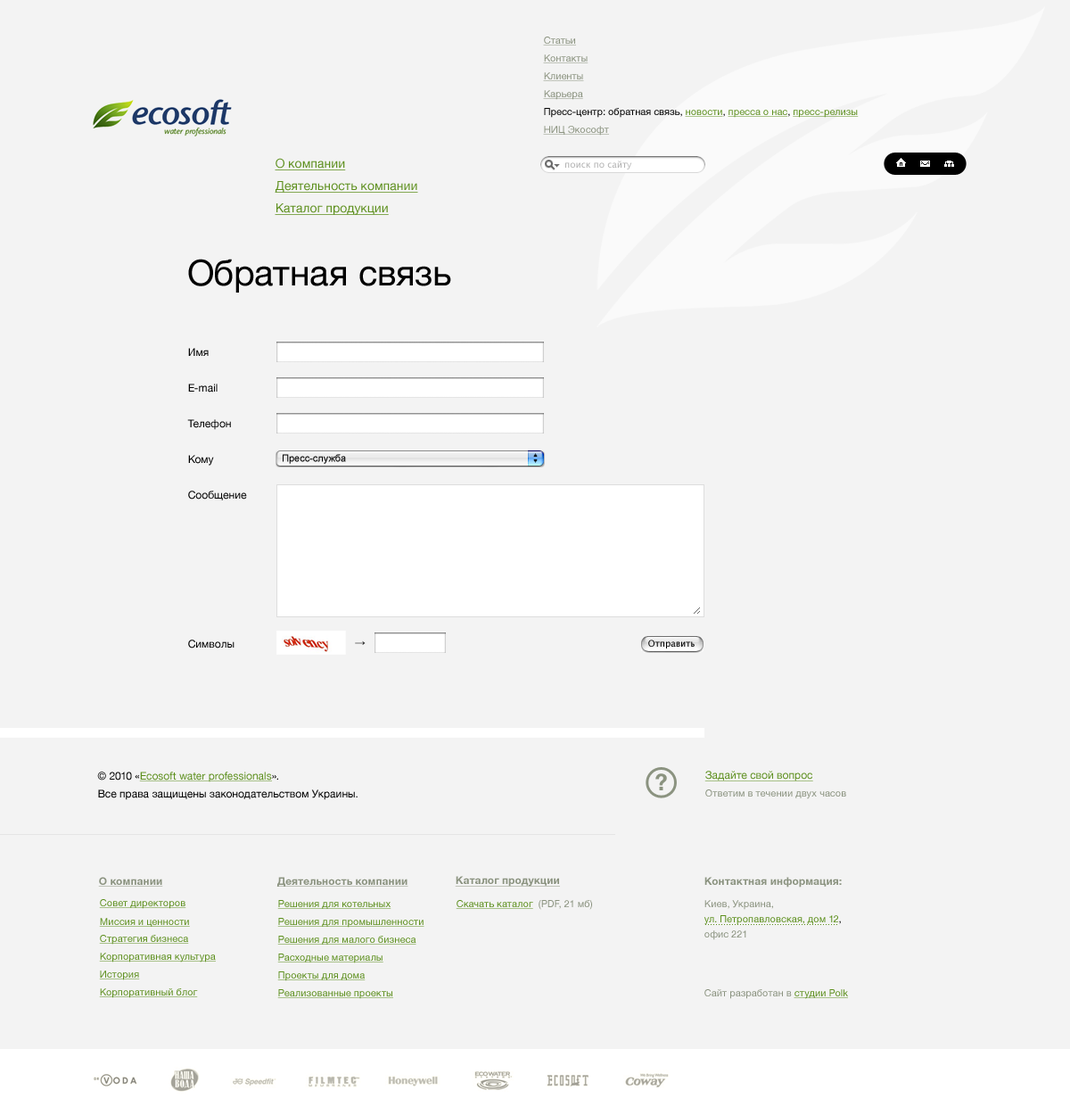
<style>
.page{position:relative;width:1070px;height:1115px;background:#f3f3f3}
.page>*{position:absolute;margin:0}
.t1{font:9.8px "HelveticaNeue";color:#8b9380;text-decoration:underline}
.t2{font:9.8px "HelveticaNeue";color:#000000}
.t3{font:9.8px "HelveticaNeue";color:#5e901f;text-decoration:underline}
.t4{font:9.8px "HelveticaNeue";color:#010101}
.t5{font:12.5px "HelveticaNeue";color:#5e901f;text-decoration:underline}
.t6{font:8.9px "LucidaGrande";color:#b2b2b2}
.t7{font:35.7px "HelveticaNeue";color:#000000}
.t8{font:10.7px "HelveticaNeue";color:#000000}
.t9{font:9.8px "ArialMT";color:#000000}
.t10{font:10.7px "ArialMT"}
.t11{font:8.9px "LucidaGrande";color:#000000}
.t12{font:10.7px/17.8px "HelveticaNeue";color:#000000}
.t13{font:10.7px/17.8px "HelveticaNeue";color:#5e901f;text-decoration:underline}
.t14{font:10.7px "HelveticaNeue";color:#5e901f;text-decoration:underline}
.t15{font:9.8px "HelveticaNeue";color:#8b9380}
.t16{font:10.7px "HelveticaNeue-Bold";color:#8b9380;text-decoration:underline}
.t17{font:9.8px/15.2px "HelveticaNeue";color:#5e901f}
.t18{font:10.7px/17.8px "HelveticaNeue-Bold";color:#8b9380}
.t19{font:9.8px/22.3px "HelveticaNeue";color:#8b9380}
.t20{font:9.8px/15.2px "HelveticaNeue";color:#000000}
.t21{font:9.8px/15.2px "HelveticaNeue";color:#8b9380}
</style>
<div class="page">
<p class="t1" style="left:543px;top:37px;width:33px;height:8px">Статьи</p>
<p class="t1" style="left:543px;top:54px;width:45px;height:9px">Контакты</p>
<p class="t1" style="left:543px;top:72px;width:41px;height:9px">Клиенты</p>
<p class="t1" style="left:543px;top:90px;width:40px;height:10px">Карьера</p>
<p class="t2" style="left:544px;top:108px;width:315px;height:10px">Пресс-центр: обратная связь, <span class="t3">новости</span>, <span class="t3">пресса о нас</span><span class="t4">, </span><span class="t3">пресс-релизы</span></p>
<p class="t1" style="left:543px;top:126px;width:66px;height:10px">НИЦ Экософт</p>
<p class="t5" style="left:275px;top:158px;width:71px;height:12px">О компании</p>
<p class="t6" style="left:565px;top:160px;width:67px;height:9px">поиск по сайту</p>
<p class="t5" style="left:275px;top:181px;width:143px;height:12px">Деятельность компании</p>
<p class="t5" style="left:275px;top:203px;width:114px;height:12px">Каталог продукции</p>
<p class="t7" style="left:188px;top:259px;width:263px;height:33px">Обратная связь</p>
<p class="t8" style="left:188px;top:348px;width:21px;height:8px">Имя</p>
<p class="t8" style="left:188px;top:383px;width:30px;height:9px">E-mail</p>
<p class="t8" style="left:187px;top:419px;width:44px;height:11px">Телефон</p>
<p class="t8" style="left:188px;top:455px;width:26px;height:10px">Кому</p>
<p class="t9" style="left:283px;top:454px;width:63px;height:10px">Пресс-служба</p>
<p class="t8" style="left:188px;top:490px;width:59px;height:10px">Сообщение</p>
<p class="t8" style="left:188px;top:639px;width:46px;height:9px">Символы</p>
<p class="t10" style="left:355px;top:640px;width:11px;height:5px">→</p>
<p class="t11" style="left:648px;top:639px;width:47px;height:9px">Отправить</p>
<p class="t12" style="left:97px;top:771px;width:261px;height:29px">© 2010 «<span class="t13">Ecosoft water professionals</span>».<br>Все права защищены законодательством Украины.</p>
<p class="t14" style="left:704px;top:770px;width:109px;height:11px">Задайте свой вопрос</p>
<p class="t15" style="left:705px;top:789px;width:141px;height:10px">Ответим в течении двух часов</p>
<p class="t16" style="left:98px;top:876px;width:65px;height:10px">О компании</p>
<p class="t16" style="left:276px;top:876px;width:132px;height:10px">Деятельность компании</p>
<p class="t16" style="left:455px;top:876px;width:105px;height:10px">Каталог продукции</p>
<p class="t17" style="left:703px;top:876px;width:139px;height:64px"><span class="t18">Контактная информация:<br></span><span class="t19">Киев, Украина,<br></span>ул. Петропавловская, дом 12<span class="t20">,<br></span><span class="t21">офис 221</span></p>
<p class="t3" style="left:99px;top:899px;width:87px;height:10px">Совет директоров</p>
<p class="t3" style="left:277px;top:900px;width:114px;height:9px">Решения для котельных</p>
<p class="t3" style="left:456px;top:900px;width:77px;height:9px">Скачать каталог</p>
<p class="t15" style="left:539px;top:900px;width:53px;height:9px">(PDF, 21 мб)</p>
<p class="t3" style="left:99px;top:917px;width:91px;height:9px">Миссия и ценности</p>
<p class="t3" style="left:277px;top:917px;width:147px;height:10px">Решения для промышленности</p>
<p class="t3" style="left:99px;top:934px;width:90px;height:10px">Стратегия бизнеса</p>
<p class="t3" style="left:277px;top:935px;width:139px;height:9px">Решения для малого бизнеса</p>
<p class="t3" style="left:99px;top:952px;width:117px;height:10px">Корпоративная культура</p>
<p class="t3" style="left:277px;top:953px;width:106px;height:10px">Расходные материалы</p>
<p class="t3" style="left:99px;top:970px;width:41px;height:10px">История</p>
<p class="t3" style="left:277px;top:971px;width:89px;height:10px">Проекты для дома</p>
<p class="t3" style="left:99px;top:988px;width:99px;height:10px">Корпоративный блог</p>
<p class="t3" style="left:277px;top:989px;width:116px;height:10px">Реализованные проекты</p>
<p class="t15" style="left:704px;top:989px;width:144px;height:10px">Сайт разработан в <span class="t3">студии Polk</span></p>
</div>
